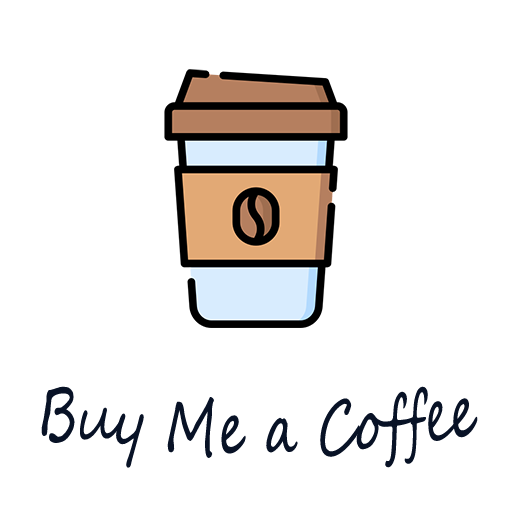
<style>
.page{position:relative;width:512px;height:512px;background:#ffffff}
.page>*{position:absolute;margin:0}
.t1{font:74px "SegoeScript";color:#081226;scale:0.68 1}
</style>
<div class="page">
<p class="t1" style="left:41px;top:386px;width:437px;height:82px">Buy Me a Coffee</p>
</div>
